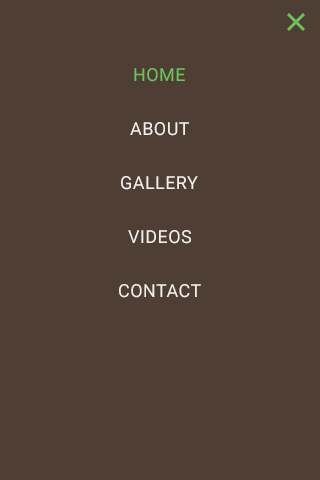
<style>
.page{position:relative;width:320px;height:480px;background:#4f3e33}
.page>*{position:absolute;margin:0}
.t1{font:18px "Roboto-Regular";letter-spacing:0.025em;color:#6dc25f}
.t2{font:18px "Roboto-Regular";letter-spacing:0.025em;color:#f3efeb}
</style>
<div class="page">
<p class="t1" style="left:134px;top:68px;width:51px;height:14px">HOME</p>
<p class="t2" style="left:130px;top:122px;width:59px;height:14px">ABOUT</p>
<p class="t2" style="left:121px;top:176px;width:77px;height:14px">GALLERY</p>
<p class="t2" style="left:128px;top:230px;width:63px;height:14px">VIDEOS</p>
<p class="t2" style="left:119px;top:284px;width:82px;height:14px">CONTACT</p>
</div>
